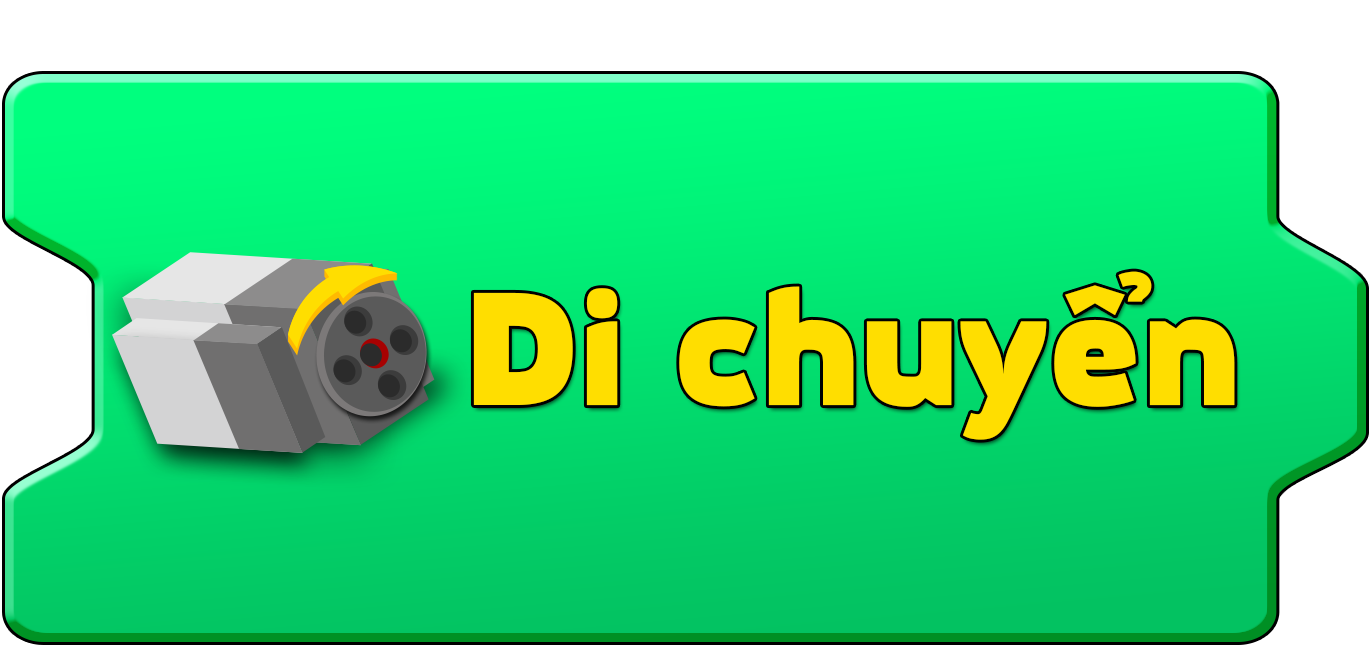
<style>
.page{position:relative;width:1371px;height:646px}
.page>*{position:absolute;margin:0}
.t1{font:157.8px "MovaviGrotesqueBlack";color:#ffde00}
</style>
<div class="page">
<p class="t1" style="left:473px;top:271px;width:762px;height:169px">Di chuyển</p>
</div>
